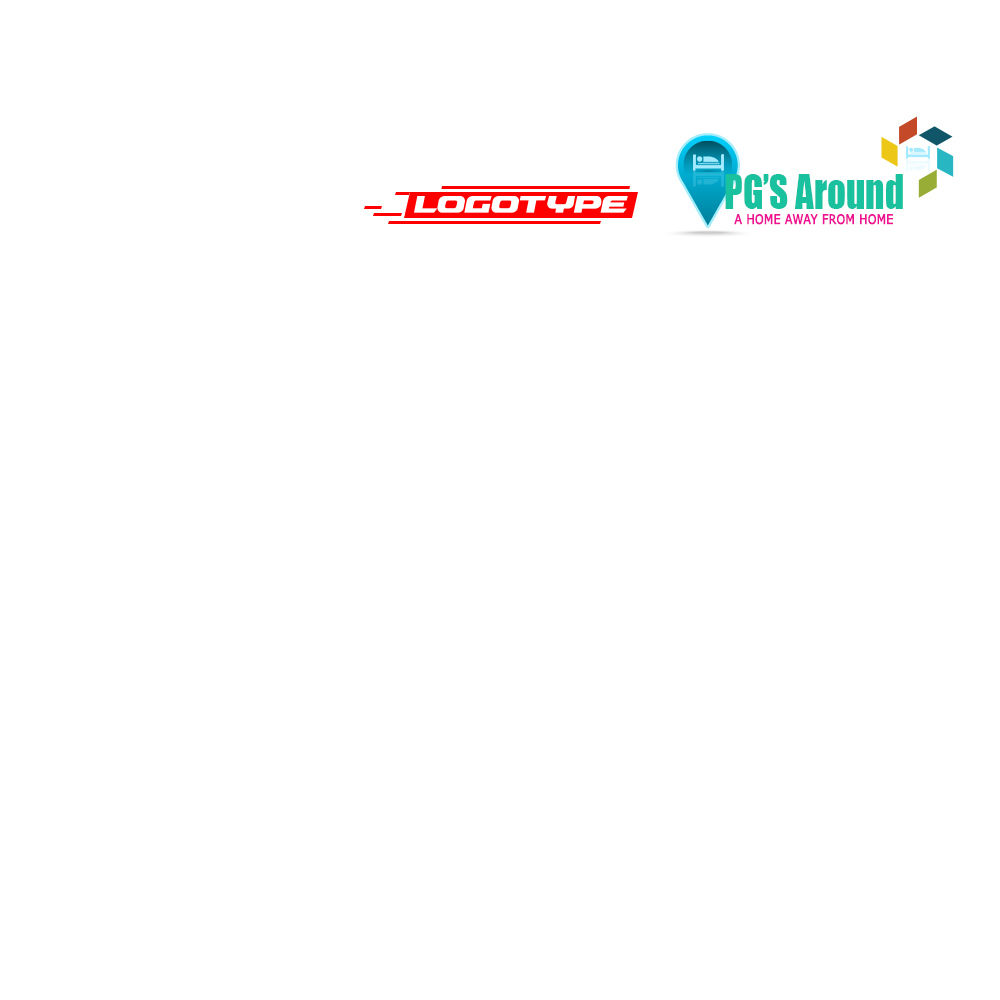
<style>
.page{position:relative;width:1000px;height:1000px;background:#ffffff}
.page>*{position:absolute;margin:0}
.t1{font:44.4px "Impact";color:#1ac19f;scale:0.83 1}
.t2{font:13.2px "Verdana";color:#ee1193;font-weight:bold;scale:0.83 1}
</style>
<div class="page">
<p class="t1" style="left:725px;top:174px;width:178px;height:35px">PG’S Around</p>
<p class="t2" style="left:734px;top:214px;width:159px;height:11px">A HOME AWAY FROM HOME</p>
</div>
